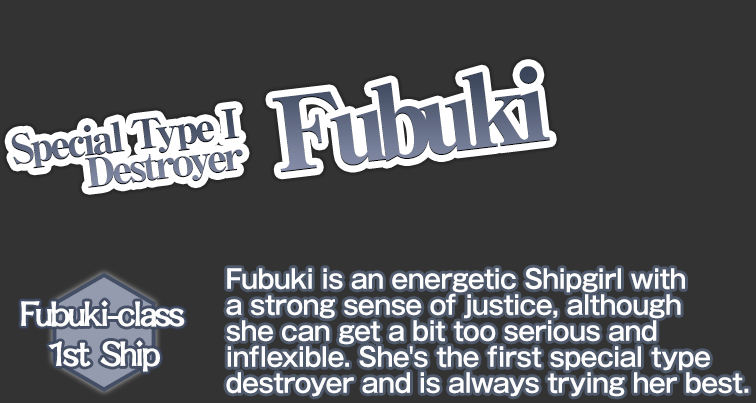
<style>
.page{position:relative;width:756px;height:403px;background:#333333}
.page>*{position:absolute;margin:0}
.t1{font:40px/32px "RyuminPro-ExHeavy";letter-spacing:-0.08em}
.t2{font:26px/26px "GothicMB101Pro-DeBold";letter-spacing:-0.02em;color:#fdfdfd;scale:0.95 1}
.t3{font:40px/40px "DFLungMen-W9-WINP-BF";letter-spacing:-0.09em;color:#fdfdfd;font-weight:bold}
</style>
<div class="page">
<p class="t1" style="left:11px;top:108px;width:232px;height:80px;text-align:right;rotate:-7deg">Special Type I<br>Destroyer</p>
<p class="t2" style="left:226px;top:267px;width:523px;height:130px">Fubuki is an energetic Shipgirl with <br>a strong sense of justice, although<br>she can get a bit too serious and <br>inflexible. She's the first special type <br>destroyer and is always trying her best.</p>
<p class="t3" style="left:21px;top:300px;width:164px;height:72px;text-align:center">Fubuki-class<br>1st Ship</p>
</div>
